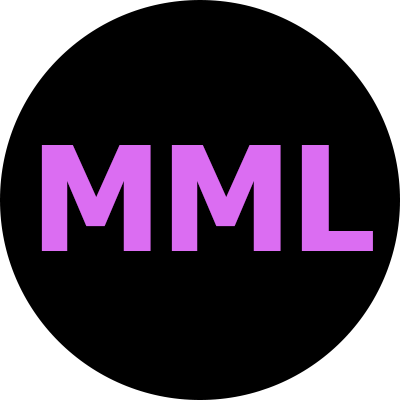
<style>
.page{position:relative;width:400px;height:400px;background:#000000}
.page>*{position:absolute;margin:0}
.t1{font:145.8px "Tahoma-Bold";color:#db6df2}
</style>
<div class="page">
<p class="t1" style="left:41px;top:145px;width:332px;height:106px">MML</p>
</div>
